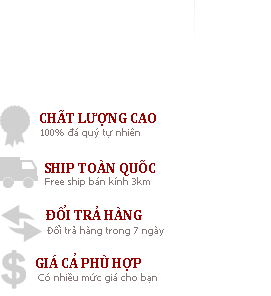
<style>
.page{position:relative;width:271px;height:296px;background:#ffffff}
.page>*{position:absolute;margin:0}
.t1{font:14px "Cambria-Bold";color:#990000}
.t2{font:10px "Tahoma";color:#857676}
.t3{font:6px "CambriaMath";color:#990000}
</style>
<div class="page">
<p class="t1" style="left:40px;top:110px;width:116px;height:16px">CHẤT LƯỢNG CAO</p>
<p class="t2" style="left:41px;top:128px;width:99px;height:10px">100% đá quý tự nhiên</p>
<p class="t1" style="left:45px;top:160px;width:110px;height:16px">SHIP TOÀN QUỐC</p>
<p class="t2" style="left:45px;top:177px;width:105px;height:10px">Free ship bán kính 3km</p>
<p class="t1" style="left:46px;top:207px;width:96px;height:13px">ĐÔI TRA HÀNG</p>
<p class="t3" style="left:64px;top:205px;width:2px;height:3px">?</p>
<p class="t3" style="left:96px;top:206px;width:2px;height:3px">?</p>
<p class="t2" style="left:47px;top:225px;width:117px;height:11px">Đổi trả hàng trong 7 ngày</p>
<p class="t1" style="left:36px;top:255px;width:105px;height:16px">GIÁ CA PHÙ HỢP</p>
<p class="t3" style="left:74px;top:253px;width:2px;height:3px">?</p>
<p class="t2" style="left:38px;top:273px;width:119px;height:10px">Có nhiều mức giá cho bạn</p>
</div>
